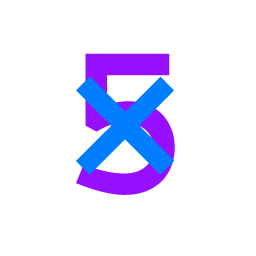
<style>
.page{position:relative;width:256px;height:256px;background:#ffffff}
.page>*{position:absolute;margin:0}
.t1{font:230px "Courier-Bold";color:#970fff}
.t2{font:230px "ArialUnicodeMS";color:#007eff}
</style>
<div class="page">
<p class="t1" style="left:76px;top:53px;width:99px;height:142px">5</p>
<p class="t2" style="left:76px;top:76px;width:99px;height:99px">×</p>
</div>
